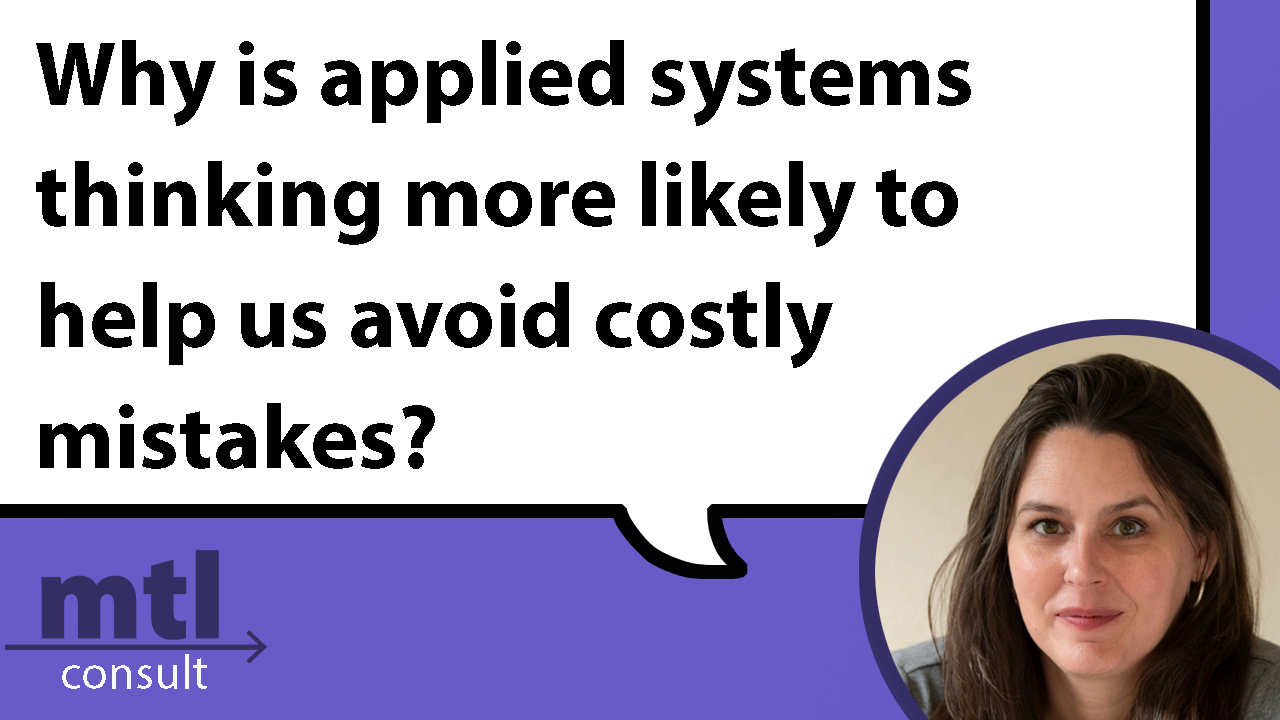
<style>
.page{position:relative;width:1280px;height:720px;background:#ffffff}
.page>*{position:absolute;margin:0}
.t1{font:91.7px "MyriadPro-Bold";color:#000000}
</style>
<div class="page">
<p class="t1" style="left:36px;top:40px;width:935px;height:429px">Why is applied systems <br>thinking more likely to<br>help us avoid costly<br>mistakes?</p>
</div>
